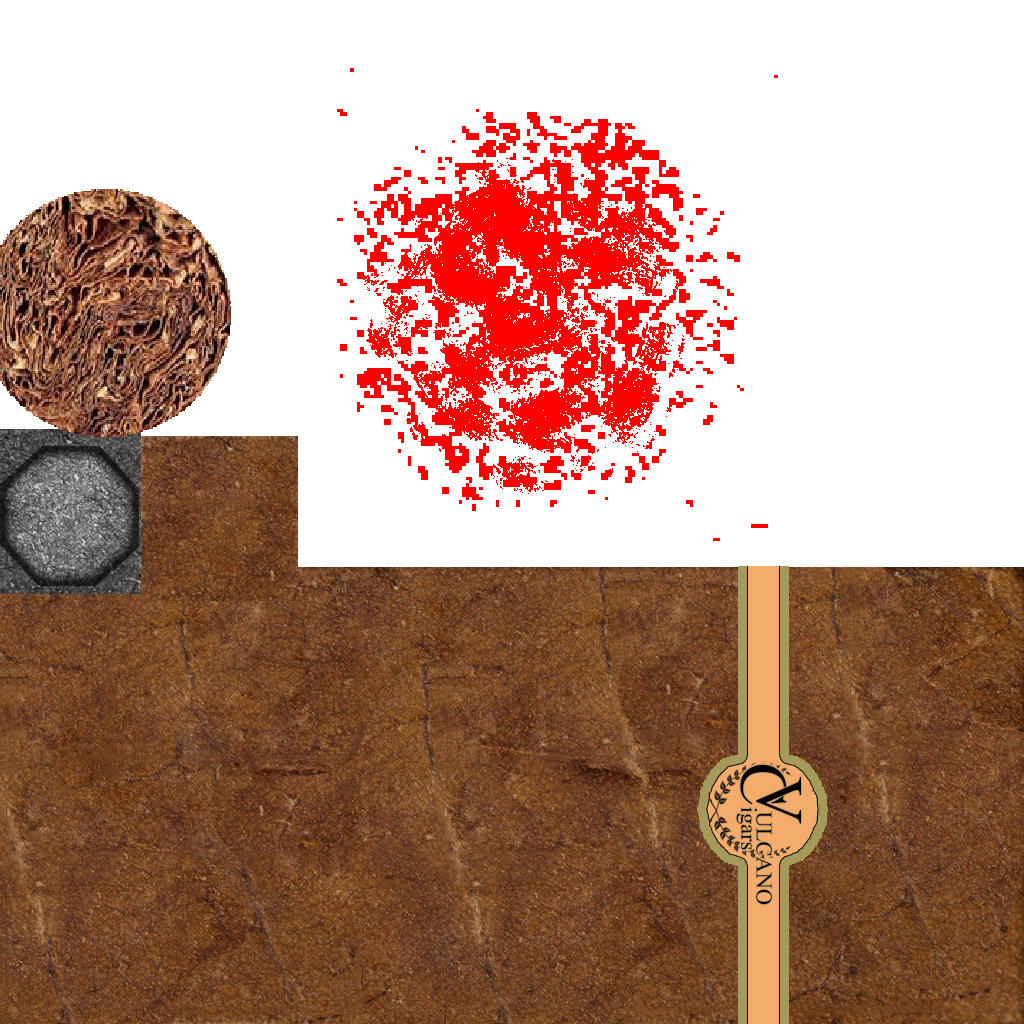
<style>
.page{position:relative;width:1024px;height:1024px;background:#ffffff}
.page>*{position:absolute;margin:0}
.t1{font:22.5px "MongolianBaiti";color:#000000}
.t2{font:66.2px "MongolianBaiti";color:#000000;text-transform:uppercase}
.t3{font:22.5px "MongolianBaiti";color:#000000;text-transform:uppercase}
</style>
<div class="page">
<p class="t1" style="left:736px;top:764px;width:51px;height:86px;rotate:90deg"><span class="t2">C</span>igars</p>
<p class="t2" style="left:756px;top:777px;width:46px;height:47px;rotate:90deg">V</p>
<p class="t3" style="left:756px;top:811px;width:16px;height:94px;rotate:90deg">ulcano</p>
</div>
